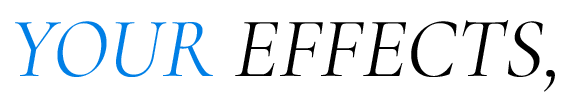
<style>
.page{position:relative;width:570px;height:100px;background:#ffffff}
.page>*{position:absolute;margin:0}
.t1{font:86px "Cormorant-Italic";color:#000000;text-transform:uppercase}
.t2{font:86px "Cormorant-Italic";color:#007fe6;text-transform:uppercase}
</style>
<div class="page">
<p class="t1" style="left:15px;top:20px;width:540px;height:72px"><span class="t2">Your</span> EFFECTS,</p>
</div>
